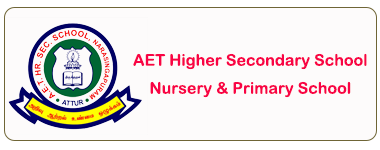
<style>
.page{position:relative;width:380px;height:150px;background:#fdfbfb}
.page>*{position:absolute;margin:0}
.t1{font:16px "ArialRoundedMTBold";color:#f90345}
</style>
<div class="page">
<p class="t1" style="left:133px;top:53px;width:234px;height:45px;text-align:center">AET Higher Secondary School  Nursery &amp; Primary School</p>
</div>
